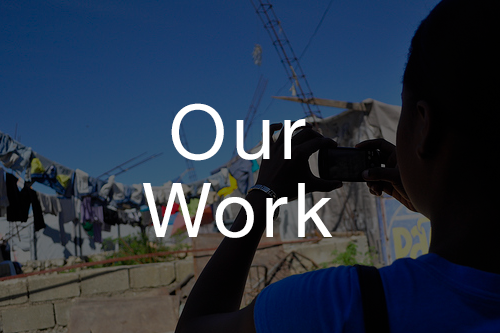
<style>
.page{position:relative;width:500px;height:333px}
.page>*{position:absolute;margin:0}
.t1{font:75.5px/262.5px "HelveticaNeue";letter-spacing:0.075em;color:#ffffff}
</style>
<div class="page">
<p class="t1" style="left:143px;top:103px;width:190px;height:135px;text-align:center">Our<br>Work</p>
</div>
